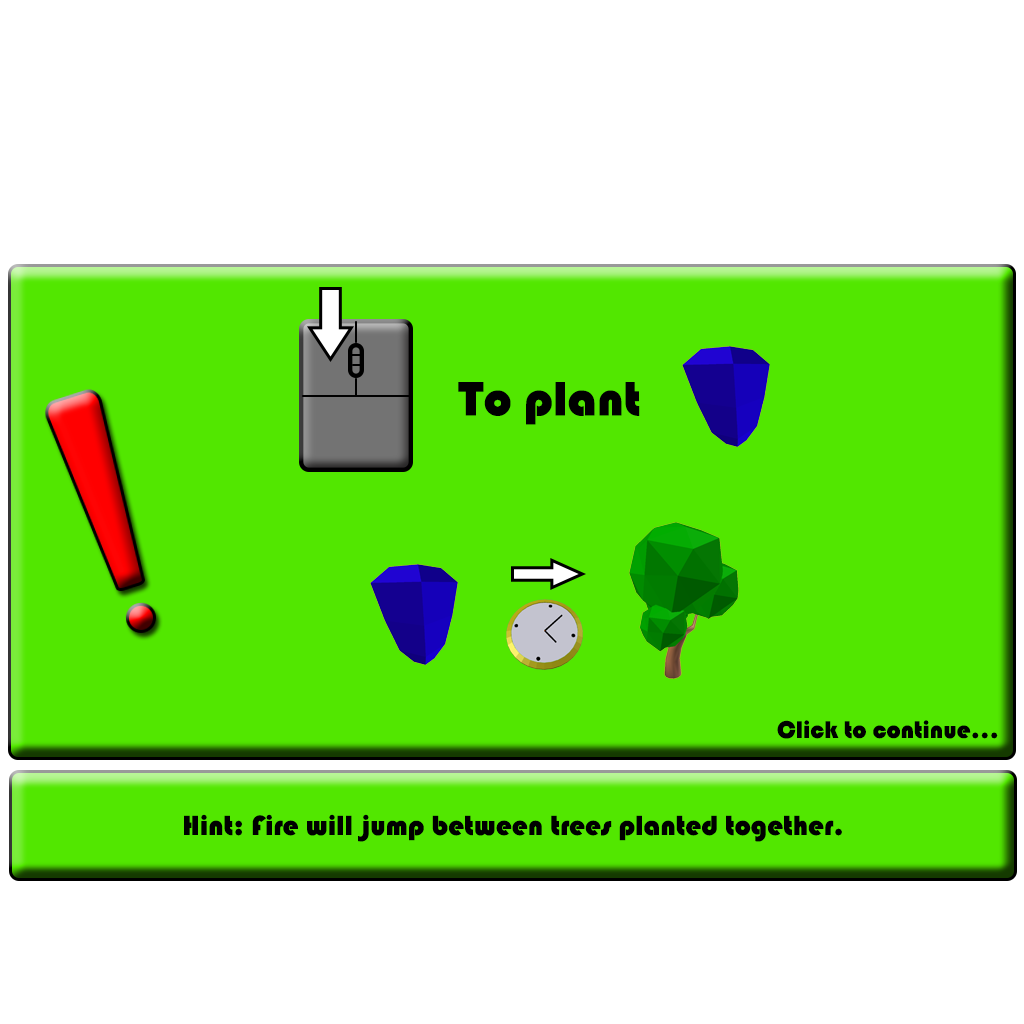
<style>
.page{position:relative;width:1024px;height:1024px;background:#ffffff}
.page>*{position:absolute;margin:0}
.t1{font:50px "Bauhaus93";color:#000000}
.t2{font:25px "Bauhaus93";color:#000000}
.t3{font:28.7px "Bauhaus93";color:#000000}
</style>
<div class="page">
<p class="t1" style="left:458px;top:382px;width:182px;height:43px">To plant</p>
<p class="t2" style="left:777px;top:720px;width:221px;height:19px">Click to continue...</p>
<p class="t3" style="left:184px;top:814px;width:658px;height:28px">Hint: Fire will jump between trees planted together.</p>
</div>
